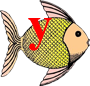
<style>
.page{position:relative;width:90px;height:86px;background:#ffffff}
.page>*{position:absolute;margin:0}
.t1{font:48px "TimesNewRomanPS-BoldMT";color:#ff0000}
</style>
<div class="page">
<p class="t1" style="left:28px;top:18px;width:24px;height:33px">y</p>
</div>
